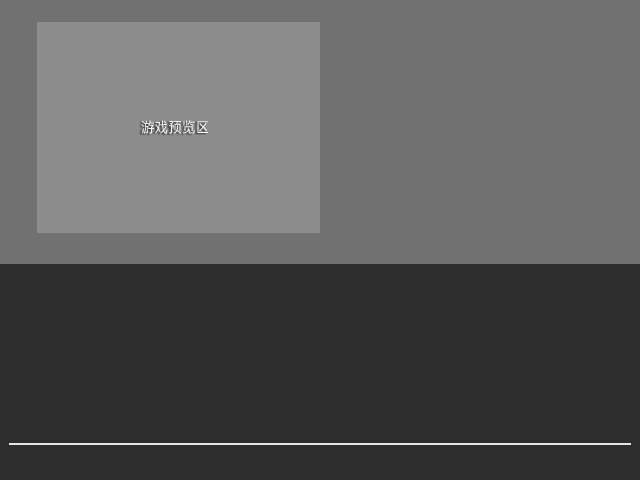
<style>
.page{position:relative;width:640px;height:480px;background:#2d2d2d}
.page>*{position:absolute;margin:0}
.t1{font:14px "MicrosoftYaHei";letter-spacing:0.1em;color:#f5f5f5;text-transform:uppercase;scale:0.89 1}
</style>
<div class="page">
<p class="t1" style="left:141px;top:120px;width:67px;height:14px">游戏预览区</p>
</div>
